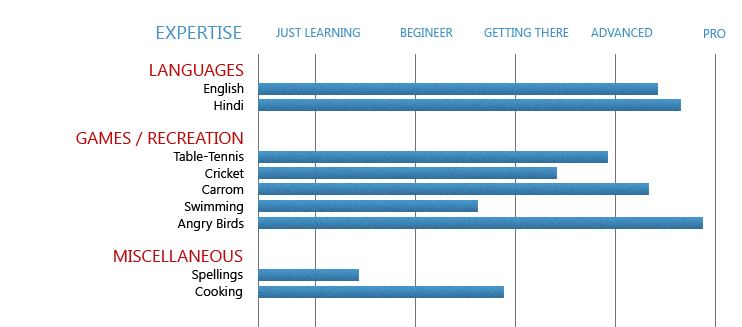
<style>
.page{position:relative;width:742px;height:327px;background:#ffffff}
.page>*{position:absolute;margin:0}
.t1{font:19px "SegoeUI";color:#4695c8}
.t2{font:12px "SegoeUI";color:#4695c8}
.t3{font:12px "SegoeUI";color:#4594c8}
.t4{font:13px/16.8px "SegoeUI";color:#000000}
.t5{font:17px/16.8px "SegoeUI";color:#ba0b0b}
</style>
<div class="page">
<p class="t1" style="left:156px;top:26px;width:86px;height:13px">EXPERTISE</p>
<p class="t2" style="left:276px;top:28px;width:84px;height:9px">JUST LEARNING</p>
<p class="t2" style="left:401px;top:28px;width:52px;height:9px">BEGINEER</p>
<p class="t2" style="left:484px;top:28px;width:85px;height:9px">GETTING THERE</p>
<p class="t2" style="left:591px;top:28px;width:62px;height:9px">ADVANCED</p>
<p class="t3" style="left:704px;top:29px;width:22px;height:9px">PRO</p>
<p class="t4" style="left:150px;top:64px;width:94px;height:46px;text-align:right"><span class="t5"> LANGUAGES<br></span>English<br>Hindi</p>
<p class="t4" style="left:76px;top:132px;width:168px;height:99px;text-align:right"><span class="t5"> GAMES / RECREATION<br></span>Table-Tennis<br>Cricket<br>Carrom<br>Swimming<br>Angry Birds</p>
<p class="t4" style="left:114px;top:250px;width:129px;height:49px;text-align:right"><span class="t5">MISCELLANEOUS<br></span>Spellings<br>Cooking</p>
</div>
